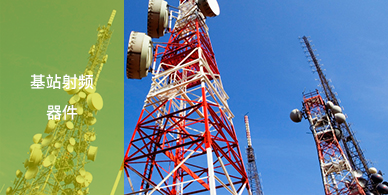
<style>
.page{position:relative;width:388px;height:195px}
.page>*{position:absolute;margin:0}
.t1{font:16px "PingFangSC-Medium";color:#ffffff}
</style>
<div class="page">
<p class="t1" style="left:30px;top:74px;width:64px;height:16px">基站射频</p>
<p class="t1" style="left:46px;top:104px;width:32px;height:16px">器件</p>
</div>
